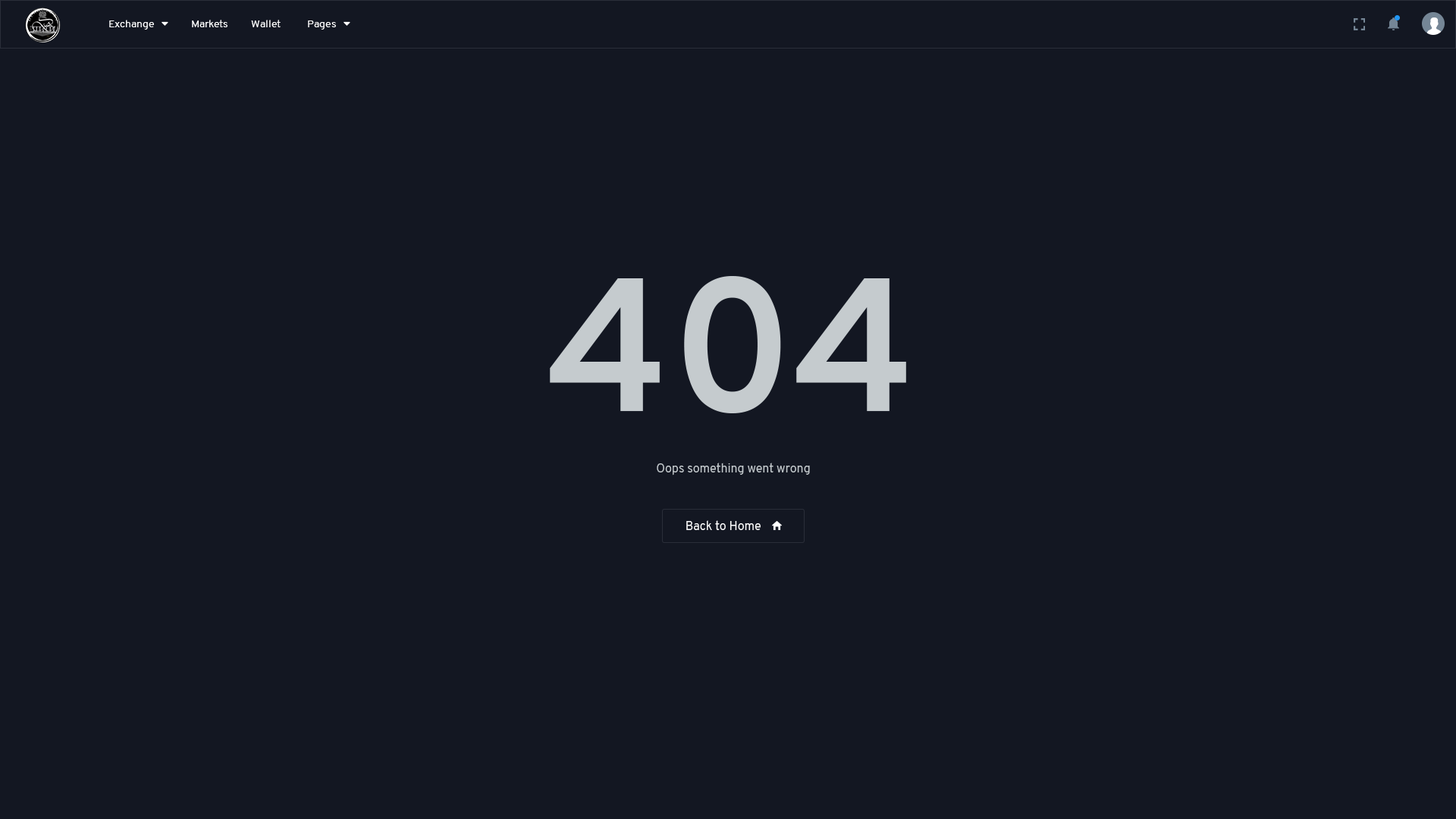
<style>
.page{position:relative;width:1456px;height:819px;background:#131722}
.page>*{position:absolute;margin:0}
.t1{font:189.6px "Overpass-Bold";color:#c5cbce}
.t2{font:12.1px "Overpass-Regular";color:#c5cbce}
.t3{font:12.1px "Overpass-Regular";color:#ffffff}
</style>
<div class="page">
<p class="t1" style="left:550px;top:276px;width:356px;height:137px">404</p>
<p class="t2" style="left:657px;top:463px;width:153px;height:12px">Oops something went wrong</p>
<p class="t3" style="left:686px;top:520px;width:75px;height:10px">Back to Home</p>
</div>
